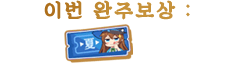
<style>
.page{position:relative;width:240px;height:65px;background:#ffffff}
.page>*{position:absolute;margin:0}
.t1{font:20px "SDKukdetopokki-aLt";letter-spacing:0.1em;color:#c38d35;font-weight:bold}
</style>
<div class="page">
<p class="t1" style="left:44px;top:0px;width:146px;height:20px">이번 완주보상 :</p>
</div>
